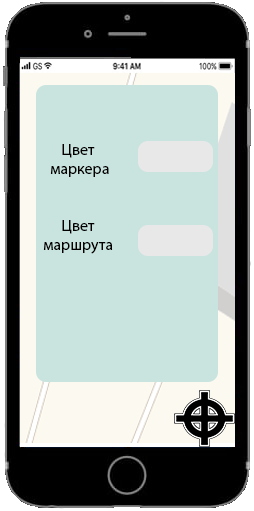
<style>
.page{position:relative;width:254px;height:511px;background:#c9e4df}
.page>*{position:absolute;margin:0}
.t1{font:12px "MyriadPro-Regular";color:#000000}
</style>
<div class="page">
<p class="t1" style="left:50px;top:144px;width:59px;height:33px;text-align:center">Цвет<br> маркера</p>
<p class="t1" style="left:43px;top:220px;width:70px;height:34px;text-align:center">Цвет<br>маршрута</p>
</div>
